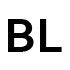
<style>
.page{position:relative;width:70px;height:70px;background:#ffffff}
.page>*{position:absolute;margin:0}
.t1{font:50.8px "Corbel-Bold";color:#000000}
</style>
<div class="page">
<p class="t1" style="left:8px;top:19px;width:54px;height:33px">BL</p>
</div>
